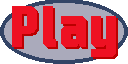
<style>
.page{position:relative;width:128px;height:64px;background:#ee1122}
.page>*{position:absolute;margin:0}
.t1{font:72px "MotionControl-Bold";color:#ee1122}
</style>
<div class="page">
<p class="t1" style="left:12px;top:6px;width:104px;height:51px">Play</p>
<p class="t1" style="left:14px;top:8px;width:104px;height:51px">Play</p>
</div>
